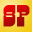
<style>
.page{position:relative;width:32px;height:32px}
.page>*{position:absolute;margin:0}
.t1{font:27.5px "Superfly";font-weight:bold}
</style>
<div class="page">
<p class="t1" style="left:3px;top:5px;width:27px;height:22px">SP</p>
</div>
